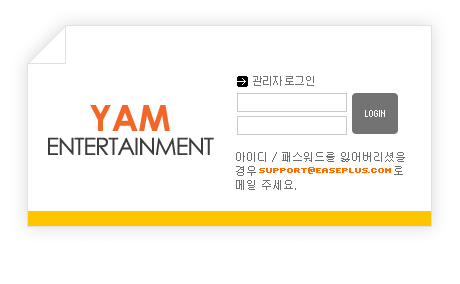
<style>
.page{position:relative;width:460px;height:284px;background:#ffffff}
.page>*{position:absolute;margin:0}
.t1{font:24px/24px "CenturyGothic";letter-spacing:-0.05em;color:#3d3d3d}
.t2{font:36px/24px "CenturyGothic-Bold";color:#f46627}
.t3{font:11px/14px "Gulim";color:#6d6d6d}
.t4{font:8px "Sevenet7";color:#fe6e00;text-transform:uppercase;font-weight:bold}
</style>
<div class="page">
<p class="t1" style="left:48px;top:105px;width:166px;height:50px;text-align:center"><span class="t2">YAM<br></span>ENTERTAINMENT</p>
<p class="t3" style="left:236px;top:152px;width:169px;height:38px">아이디 / 패스워드를 잃어버리셨을<br>경우                                  로<br>메일 주세요.</p>
<p class="t4" style="left:259px;top:167px;width:132px;height:7px">support@easeplus.com</p>
</div>
